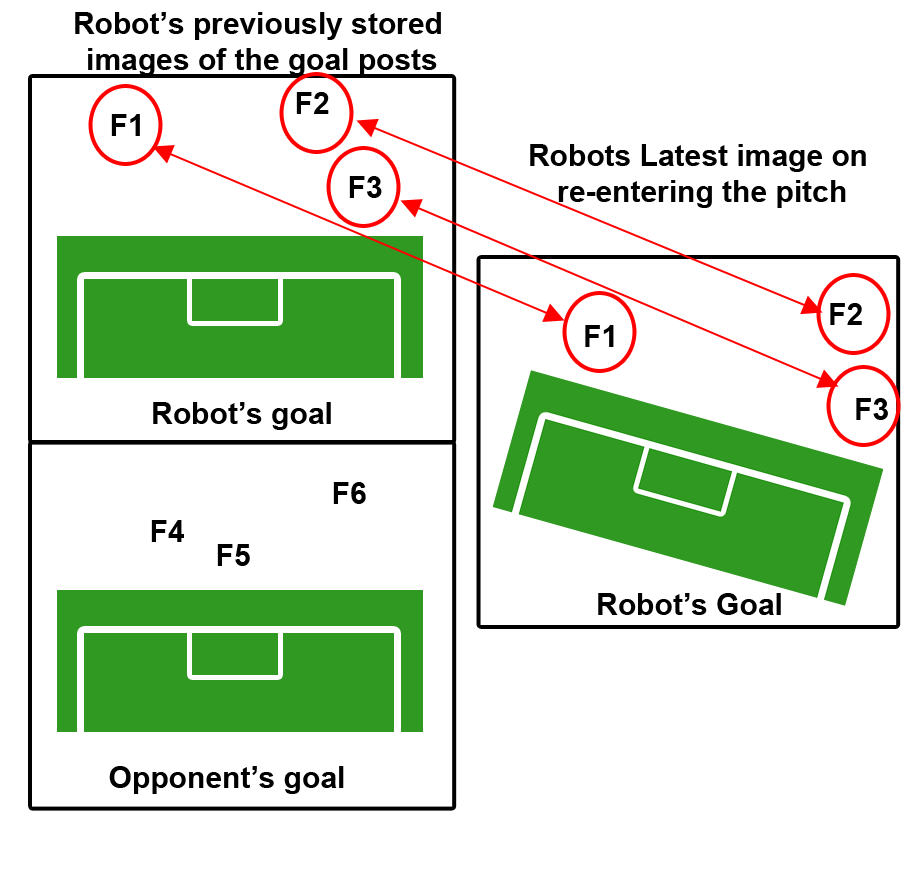
<style>
.page{position:relative;width:914px;height:882px;background:#ffffff}
.page>*{position:absolute;margin:0}
.t1{font:30px "Arial-BoldMT";color:#000000}
</style>
<div class="page">
<p class="t1" style="left:75px;top:12px;width:366px;height:64px;text-align:center">Robot’s previously stored <br>images of the goal posts</p>
<p class="t1" style="left:296px;top:92px;width:33px;height:22px">F2</p>
<p class="t1" style="left:111px;top:114px;width:29px;height:22px">F1</p>
<p class="t1" style="left:530px;top:144px;width:336px;height:64px;text-align:center">Robots Latest image on<br> re-entering the pitch</p>
<p class="t1" style="left:349px;top:176px;width:33px;height:22px">F3</p>
<p class="t1" style="left:830px;top:303px;width:32px;height:22px">F2</p>
<p class="t1" style="left:585px;top:325px;width:29px;height:22px">F1</p>
<p class="t1" style="left:856px;top:398px;width:32px;height:22px">F3</p>
<p class="t1" style="left:153px;top:402px;width:178px;height:28px">Robot’s goal</p>
<p class="t1" style="left:333px;top:482px;width:33px;height:22px">F6</p>
<p class="t1" style="left:151px;top:520px;width:33px;height:22px">F4</p>
<p class="t1" style="left:217px;top:544px;width:33px;height:22px">F5</p>
<p class="t1" style="left:598px;top:593px;width:183px;height:22px">Robot’s Goal</p>
<p class="t1" style="left:109px;top:766px;width:235px;height:28px">Opponent’s goal</p>
</div>
